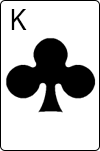
<style>
.page{position:relative;width:100px;height:151px;background:#ffffff}
.page>*{position:absolute;margin:0}
.t1{font:30px "ArialNarrow";color:#000000}
</style>
<div class="page">
<p class="t1" style="left:11px;top:9px;width:16px;height:21px">K</p>
</div>
